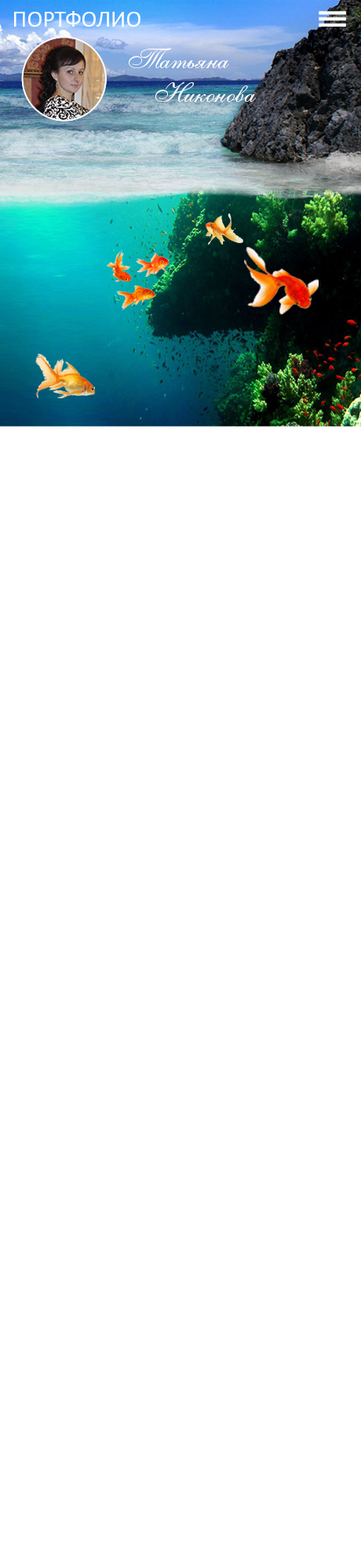
<style>
.page{position:relative;width:361px;height:1568px;background:#ffffff}
.page>*{position:absolute;margin:0}
.t1{font:23.5px "Calibri";color:#fdfefe;text-transform:uppercase}
.t2{font:27.8px "AllegroScript";color:#fbfdfe}
</style>
<div class="page">
<p class="t1" style="left:14px;top:11px;width:126px;height:16px">Портфолио</p>
<p class="t2" style="left:129px;top:48px;width:127px;height:54px;text-align:right">Татьяна     <br>               Никонова</p>
</div>
